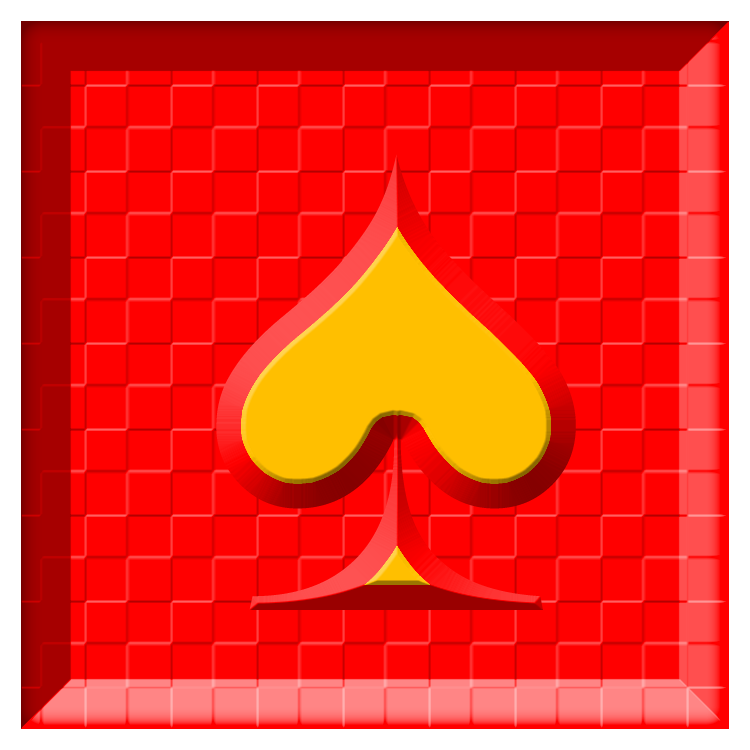
<style>
.page{position:relative;width:750px;height:750px;background:#ff0000}
.page>*{position:absolute;margin:0}
.t1{font:756.9px "ArialMT"}
</style>
<div class="page">
<p class="t1" style="left:216px;top:154px;width:360px;height:456px">♠</p>
</div>
